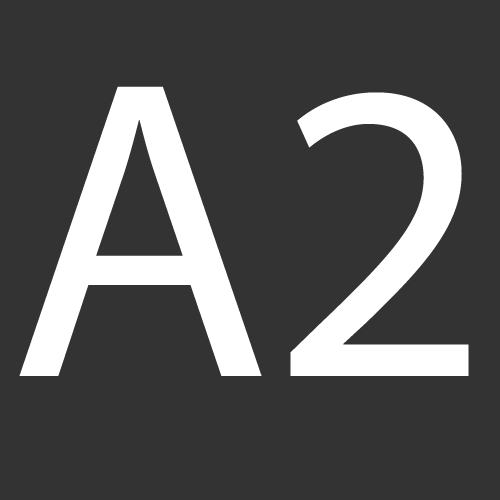
<style>
.page{position:relative;width:500px;height:500px;background:#333333}
.page>*{position:absolute;margin:0}
.t1{font:428.6px "MyriadPro-Regular";color:#ffffff}
</style>
<div class="page">
<p class="t1" style="left:19px;top:86px;width:450px;height:290px">A2</p>
</div>
